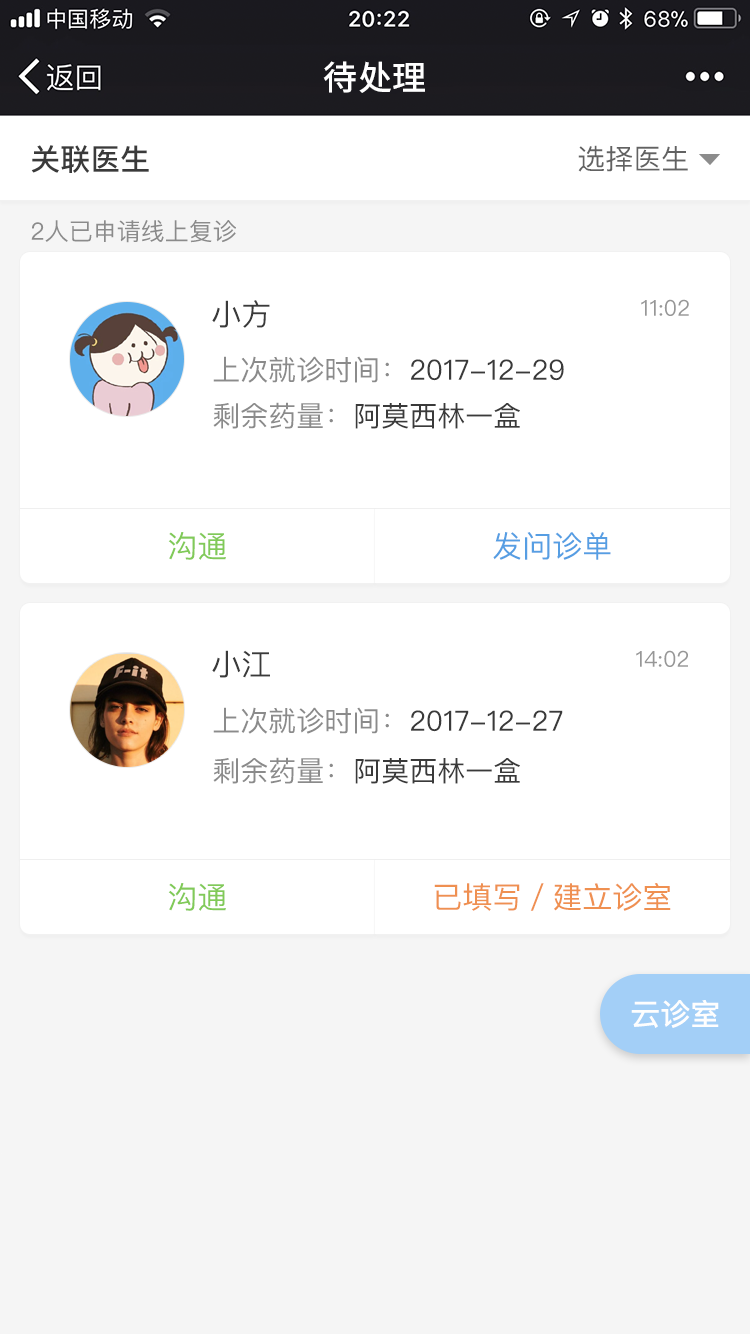
<style>
.page{position:relative;width:750px;height:1334px;background:#ffffff}
.page>*{position:absolute;margin:0}
.t1{font:34px "SourceHanSansCN-Medium";letter-spacing:0.02em;color:#ffffff}
.t2{font:30px "PingFangSC-Medium";color:#3a3a3a}
.t3{font:28px "PingFangSC-Regular";color:#626262}
.t4{font:24px "PingFangSC-Regular";color:#8b8b8b}
.t5{font:30px "PingFangSC-Regular";color:#3a3a3a}
.t6{font:22px "PingFangSC-Regular";color:#979797}
.t7{font:28px "PingFangSC-Regular";color:#8b8b8b}
.t8{font:28px "PingFangSC-Regular";color:#3a3a3a}
.t9{font:30px "PingFangSC-Regular";color:#81ca58}
.t10{font:30px "PingFangSC-Regular";color:#569ee3}
.t11{font:30px "PingFangSC-Regular";color:#ef9051}
.t12{font:30px "PingFangSC-Medium";color:#fefefe}
</style>
<div class="page">
<p class="t1" style="left:323px;top:61px;width:102px;height:32px">待处理</p>
<p class="t2" style="left:31px;top:145px;width:118px;height:28px">关联医生</p>
<p class="t3" style="left:578px;top:145px;width:110px;height:27px">选择医生</p>
<p class="t4" style="left:31px;top:220px;width:205px;height:23px">2人已申请线上复诊</p>
<p class="t5" style="left:212px;top:300px;width:58px;height:28px">小方</p>
<p class="t6" style="left:641px;top:299px;width:48px;height:17px">11:02</p>
<p class="t7" style="left:213px;top:356px;width:176px;height:27px">上次就诊时间：</p>
<p class="t8" style="left:411px;top:359px;width:153px;height:22px">2017-12-29</p>
<p class="t7" style="left:213px;top:402px;width:120px;height:27px">剩余药量：</p>
<p class="t8" style="left:355px;top:403px;width:165px;height:26px">阿莫西林一盒</p>
<p class="t9" style="left:168px;top:532px;width:58px;height:28px">沟通</p>
<p class="t10" style="left:493px;top:532px;width:118px;height:28px">发问诊单</p>
<p class="t5" style="left:212px;top:650px;width:58px;height:28px">小江</p>
<p class="t6" style="left:636px;top:650px;width:52px;height:17px">14:02</p>
<p class="t7" style="left:213px;top:707px;width:176px;height:27px">上次就诊时间：</p>
<p class="t8" style="left:411px;top:710px;width:152px;height:22px">2017-12-27</p>
<p class="t7" style="left:213px;top:757px;width:120px;height:27px">剩余药量：</p>
<p class="t8" style="left:355px;top:758px;width:165px;height:26px">阿莫西林一盒</p>
<p class="t9" style="left:168px;top:883px;width:58px;height:28px">沟通</p>
<p class="t11" style="left:434px;top:883px;width:237px;height:28px">已填写／建立诊室</p>
<p class="t12" style="left:631px;top:1000px;width:88px;height:28px">云诊室</p>
</div>
